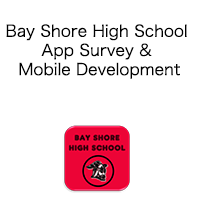
<style>
.page{position:relative;width:200px;height:200px;background:#ffffff}
.page>*{position:absolute;margin:0}
.t1{font:16px "HiraKakuPro-W3";color:#000000}
</style>
<div class="page">
<p class="t1" style="left:6px;top:24px;width:181px;height:55px;text-align:center">Bay Shore High School <br>App Survey &amp; <br>Mobile Development</p>
</div>
